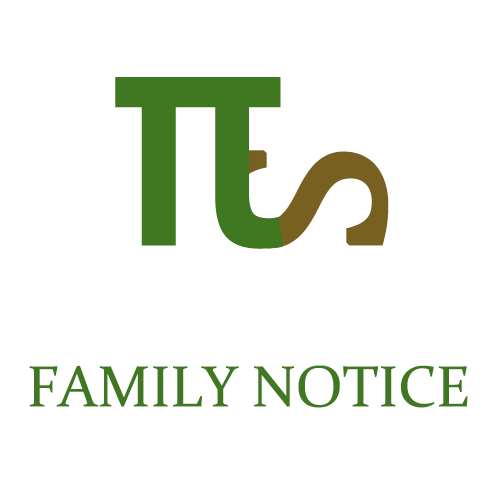
<style>
.page{position:relative;width:500px;height:500px;background:#ffffff}
.page>*{position:absolute;margin:0}
.t1{font:232.7px "CambriaMath";color:#786020;text-transform:uppercase;font-weight:bold}
.t2{font:58.3px "Constantia";color:#3f7820;text-transform:uppercase}
</style>
<div class="page">
<p class="t1" style="left:223px;top:150px;width:166px;height:99px;rotate:90deg">S</p>
<p class="t2" style="left:29px;top:365px;width:439px;height:43px">family notice</p>
</div>
